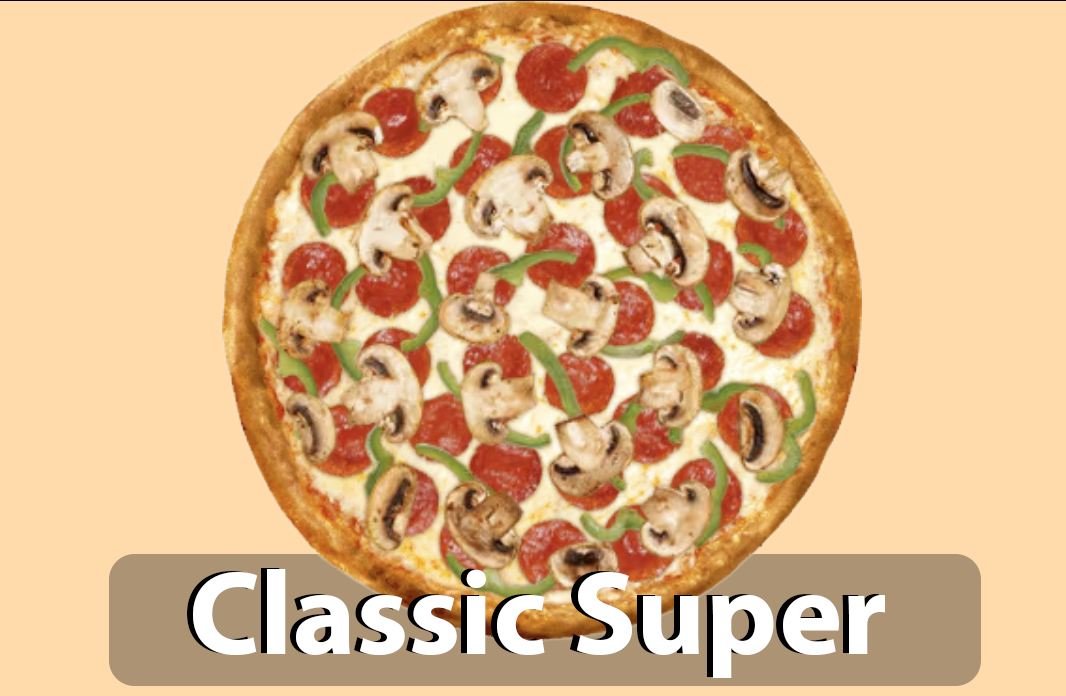
<style>
.page{position:relative;width:1066px;height:696px;background:#ffdbac}
.page>*{position:absolute;margin:0}
.t1{font:120px "MyriadPro-Bold";color:#ffffff}
</style>
<div class="page">
<p class="t1" style="left:187px;top:568px;width:692px;height:109px">Classic Super</p>
<p class="t1" style="left:193px;top:569px;width:692px;height:109px">Classic Super</p>
</div>
